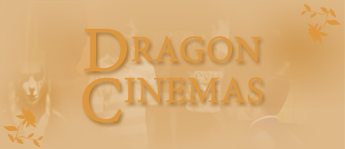
<style>
.page{position:relative;width:345px;height:149px}
.page>*{position:absolute;margin:0}
.t1{font:40px/11px "AdobeDevanagari-Regular";color:#dd983f;font-weight:bold}
.t2{font:70px/11px "AdobeDevanagari-Regular";color:#dd983f;font-weight:bold}
</style>
<div class="page">
<p class="t1" style="left:82px;top:28px;width:181px;height:95px;text-align:center"><span class="t2">D</span>RAGON<br><span class="t2">C</span>INEMAS</p>
</div>
